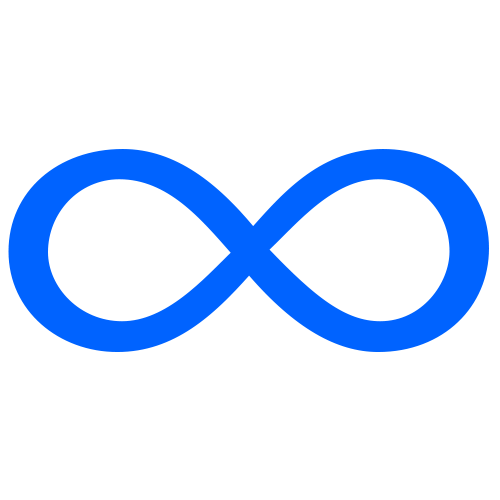
<style>
.page{position:relative;width:500px;height:500px;background:#ffffff}
.page>*{position:absolute;margin:0}
.t1{font:615.8px "CharlemagneStd-Bold";color:#0063ff;scale:1.1 1}
</style>
<div class="page">
<p class="t1" style="left:8px;top:149px;width:481px;height:203px">∞</p>
</div>
